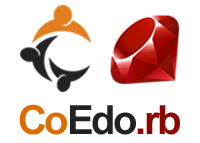
<style>
.page{position:relative;width:200px;height:143px;background:#ffffff}
.page>*{position:absolute;margin:0}
.t1{font:40px "Arial-BoldMT";letter-spacing:-0.06em;color:#212222}
.t2{font:40px "Arial-BoldMT";letter-spacing:-0.06em;color:#da6c00}
.t3{font:40px "Arial-BoldMT";letter-spacing:-0.06em;color:#8e0600}
</style>
<div class="page">
<p class="t1" style="left:19px;top:104px;width:161px;height:31px"><span class="t2">Co</span>Edo<span class="t3">.rb</span></p>
</div>
